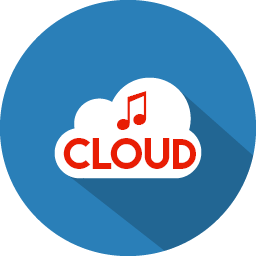
<style>
.page{position:relative;width:256px;height:256px;background:#2a7fb8}
.page>*{position:absolute;margin:0}
.t1{font:48.3px "TimesNewRomanPSMT";color:#e81d04}
.t2{font:38.7px "LemonMilk";color:#e81d04}
</style>
<div class="page">
<p class="t1" style="left:117px;top:91px;width:30px;height:39px">♫</p>
<p class="t2" style="left:63px;top:138px;width:133px;height:31px">Cloud</p>
</div>
